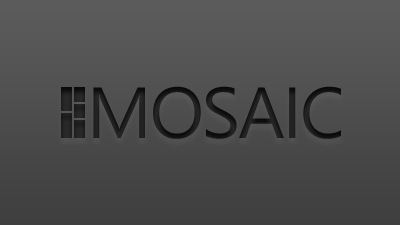
<style>
.page{position:relative;width:400px;height:225px}
.page>*{position:absolute;margin:0}
.t1{font:72px "SegoeWP";color:#282828}
</style>
<div class="page">
<p class="t1" style="left:93px;top:86px;width:248px;height:53px">MOSAIC</p>
</div>
